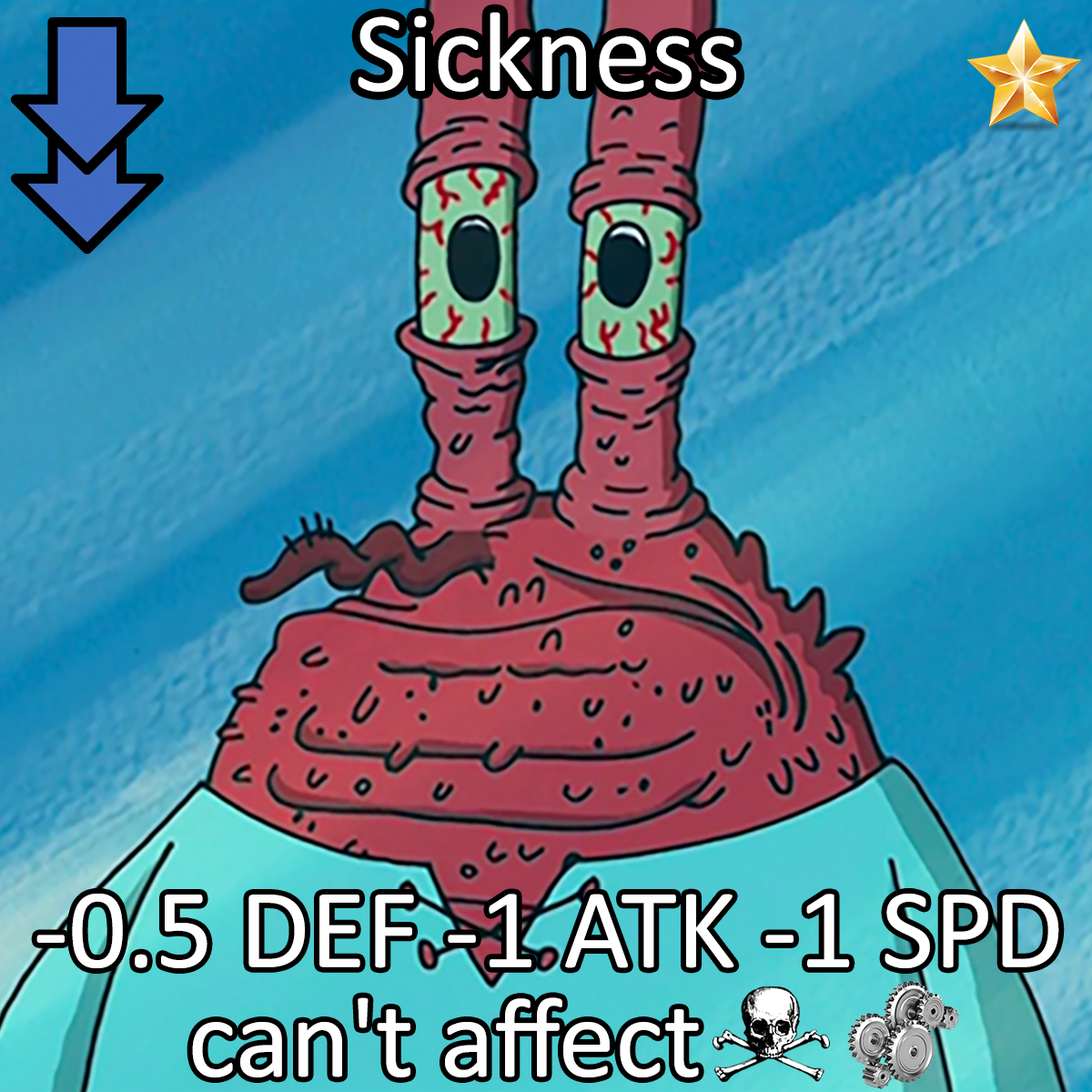
<style>
.page{position:relative;width:1092px;height:1092px}
.page>*{position:absolute;margin:0}
.t1{font:196.6px "Calibri";color:#ffffff}
.t2{font:196.6px/109.2px "Calibri";color:#ffffff}
</style>
<div class="page">
<p class="t1" style="left:358px;top:12px;width:378px;height:80px">Sickness</p>
<p class="t2" style="left:36px;top:894px;width:1023px;height:183px;text-align:center">-0.5 DEF -1 ATK -1 SPD<br>can't affect</p>
</div>
